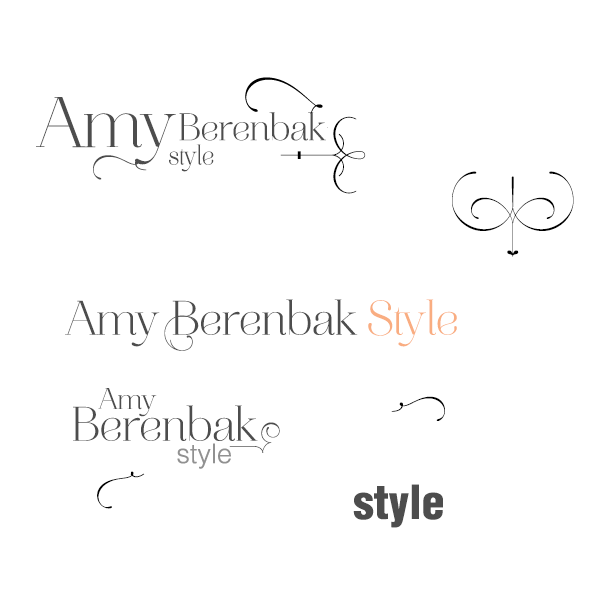
<style>
.page{position:relative;width:600px;height:600px;background:#ffffff}
.page>*{position:absolute;margin:0}
.t1{font:72px "AireBoldStd";color:#4c4c4c}
.t2{font:38.5px "AireBoldStd";color:#4c4c4c}
.t3{font:82.2px "AireFleuronsPro";letter-spacing:0.1em;color:#000000}
.t4{font:27.8px "AireBoldStd";color:#4c4c4c;scale:0.94 1}
.t5{font:72px "AireFleuronsPro";letter-spacing:0.1em;color:#4c4c4c}
.t6{font:72px "AireFleuronsPro";letter-spacing:0.1em;color:#000000}
.t7{font:48.5px "AireBoldStd";color:#4c4c4c}
.t8{font:48.5px "AireBoldStd";color:#f9ad81}
.t9{font:72px "AireFleuronsPro";color:#4c4c4c}
.t10{font:30px "AireBoldStd";color:#4c4c4c}
.t11{font:72px "AireFleuronsPro";color:#010101}
.t12{font:27.1px "Helvetica-Light";color:#919191}
.t13{font:45.5px "Helvetica-Condensed-Black";color:#4c4c4c}
</style>
<div class="page">
<p class="t1" style="left:36px;top:97px;width:140px;height:68px">Amy</p>
<p class="t2" style="left:179px;top:112px;width:147px;height:29px">Berenbak</p>
<p class="t3" style="left:280px;top:116px;width:86px;height:78px">&gt;</p>
<p class="t4" style="left:169px;top:144px;width:45px;height:28px">style</p>
<p class="t5" style="left:93px;top:155px;width:54px;height:25px;rotate:180deg">q</p>
<p class="t6" style="left:452px;top:171px;width:122px;height:86px">z</p>
<p class="t7" style="left:65px;top:299px;width:392px;height:48px">Amy Berenbak <span class="t8">Style</span></p>
<p class="t9" style="left:164px;top:315px;width:35px;height:36px">k</p>
<p class="t10" style="left:98px;top:388px;width:59px;height:29px">Amy</p>
<p class="t11" style="left:391px;top:396px;width:54px;height:25px">q</p>
<p class="t7" style="left:73px;top:405px;width:185px;height:36px">Berenbak</p>
<p class="t9" style="left:229px;top:422px;width:51px;height:31px">m</p>
<p class="t12" style="left:177px;top:443px;width:54px;height:26px">style</p>
<p class="t11" style="left:97px;top:471px;width:48px;height:38px;rotate:146deg">T</p>
<p class="t13" style="left:353px;top:484px;width:90px;height:44px">style</p>
</div>
